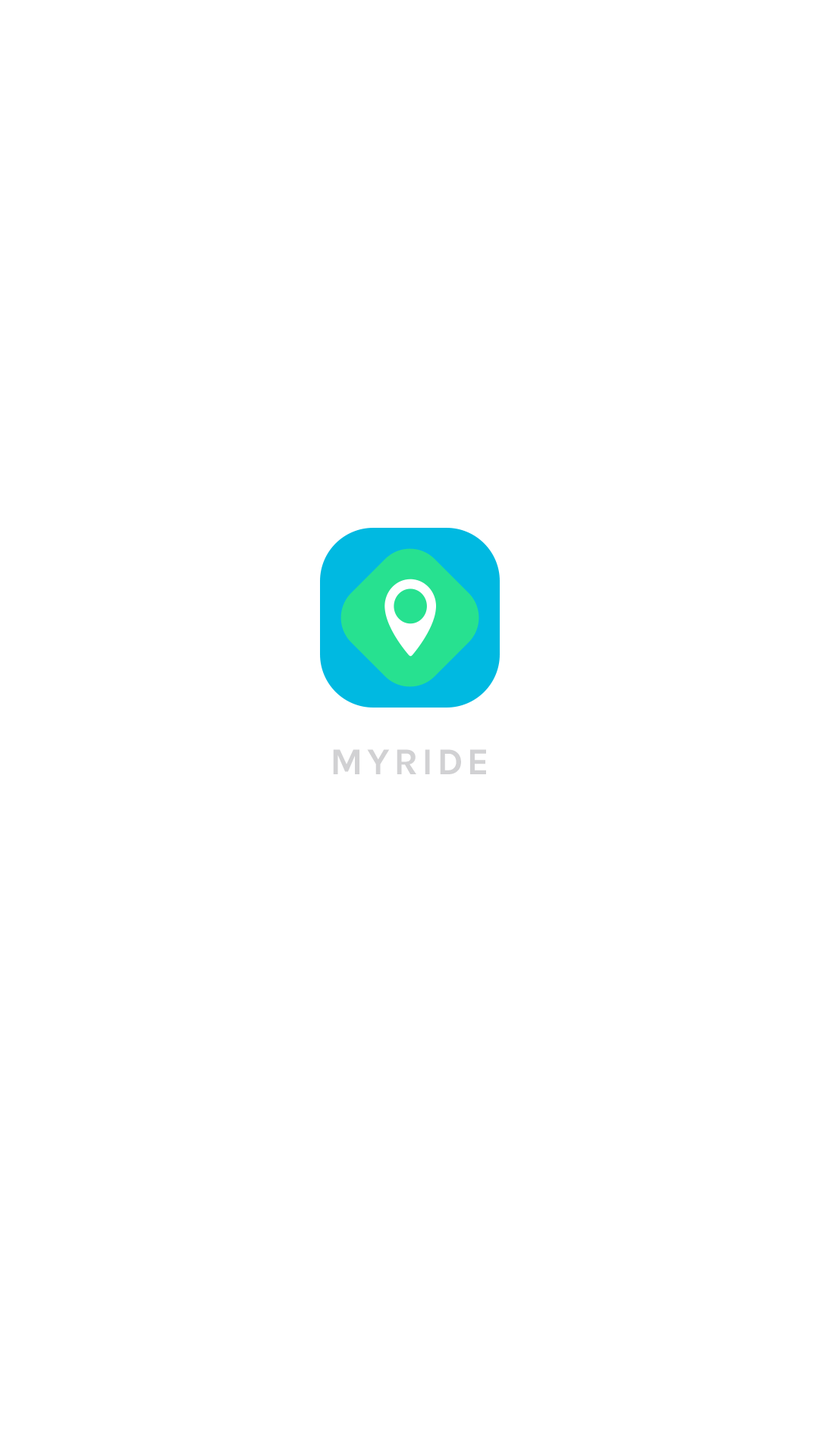
<style>
.page{position:relative;width:819px;height:1456px;background:#ffffff}
.page>*{position:absolute;margin:0}
.t1{font:37.9px "Karla-Bold";letter-spacing:0.1em;color:#d1d1d3;text-transform:uppercase}
</style>
<div class="page">
<p class="t1" style="left:333px;top:749px;width:153px;height:25px">MyRide</p>
</div>
